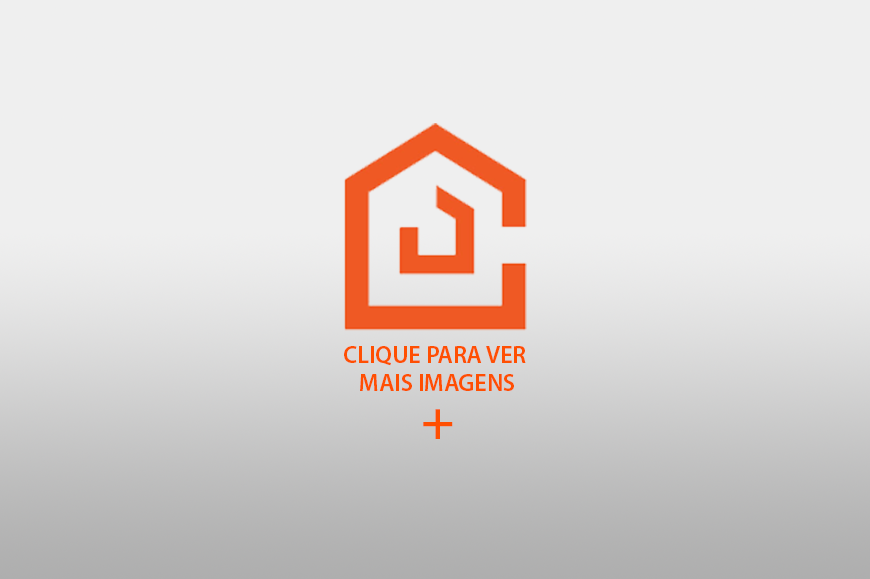
<style>
.page{position:relative;width:870px;height:579px;background:#efefef}
.page>*{position:absolute;margin:0}
.t1{font:24px "MyriadPro-Semibold";color:#ff4f02}
.t2{font:56px/48px "MyriadPro-Semibold";color:#ff4f02}
</style>
<div class="page">
<p class="t1" style="left:344px;top:346px;width:182px;height:93px;text-align:center">CLIQUE PARA VER <br>MAIS IMAGENS<br><span class="t2">+</span></p>
</div>
